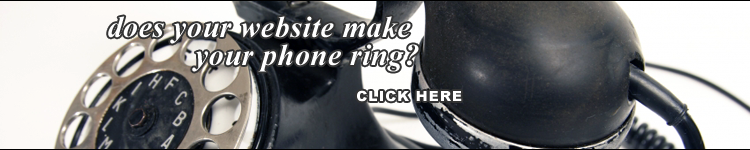
<style>
.page{position:relative;width:750px;height:150px}
.page>*{position:absolute;margin:0}
.t1{font:30px/28px "TimesNewRomanPS-BoldItalicMT";letter-spacing:0.02em;color:#ffffff}
.t2{font:14px "Arial-Black";letter-spacing:0.08em;color:#ffffff}
</style>
<div class="page">
<p class="t1" style="left:108px;top:16px;width:311px;height:56px;text-align:right">does your website make <br>your phone ring?</p>
<p class="t2" style="left:357px;top:90px;width:105px;height:12px">CLICK HERE</p>
</div>
